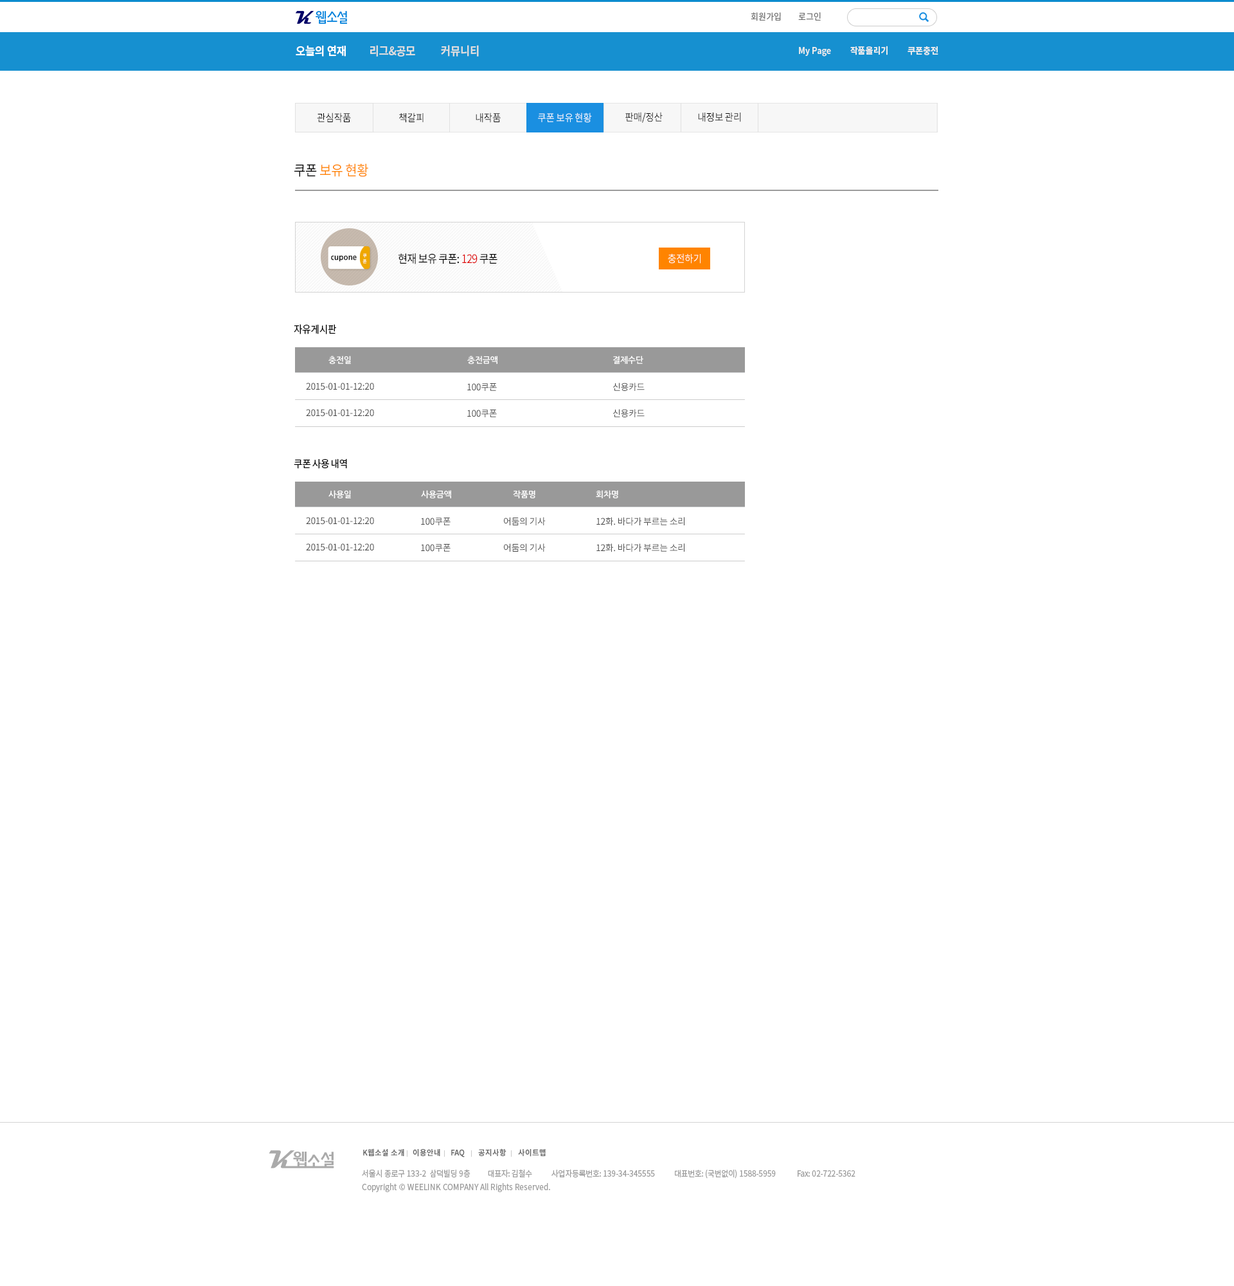
<style>
.page{position:relative;width:1234px;height:1286px;background:#ffffff}
.page>*{position:absolute;margin:0}
.t1{font:9px "NotoSansCJKkr-Regular";letter-spacing:-0.002em;color:#727272;scale:0.92 1}
.t2{font:11.6px "NotoSansCJKkr-Bold";letter-spacing:-0.002em;color:#dddddd;scale:0.92 1}
.t3{font:11.6px "NotoSansCJKkr-Bold";letter-spacing:-0.002em;color:#ffffff;scale:0.92 1}
.t4{font:9px "NotoSansCJKkr-Bold";letter-spacing:-0.002em;color:#ececec;scale:0.92 1}
.t5{font:10.3px "NotoSansCJKkr-Regular";letter-spacing:-0.05em;color:#000000;scale:0.92 1}
.t6{font:10.3px "NotoSansCJKkr-Regular";letter-spacing:-0.05em;color:#ffffff;scale:0.92 1}
.t7{font:14.1px "NotoSansCJKkr-Regular";letter-spacing:-0.05em;color:#ff8400;scale:0.92 1}
.t8{font:14.1px "NotoSansCJKkr-Regular";letter-spacing:-0.05em;color:#000000;scale:0.92 1}
.t9{font:7.7px "RixJGoB";letter-spacing:0.02em;color:#010101;scale:0.95 1}
.t10{font:4.5px "NotoSansCJKkr-Bold";color:#ffffff;scale:0.95 1}
.t11{font:11.6px "NotoSansCJKkr-Regular";letter-spacing:-0.05em;color:#000000;scale:0.92 1}
.t12{font:11.6px "NotoSansCJKkr-Regular";letter-spacing:-0.05em;color:#de0303;scale:0.92 1}
.t13{font:8.4px "NanumGothicOTFBold";letter-spacing:-0.025em;color:#ffffff}
.t14{font:9px/26.4px "NotoSansCJKkr-Regular";letter-spacing:-0.025em;color:#474747}
.t15{font:7.7px "NotoSansCJKkr-Bold";color:#666666;scale:0.96 1}
.t16{font:8.4px "NotoSansCJKkr-Regular";letter-spacing:-0.025em;color:#9d9d9d;scale:0.92 1}
.t17{font:8.4px "NotoSansCJKkr-Regular";color:#9d9d9d;scale:0.92 1}
</style>
<div class="page">
<p class="t1" style="left:751px;top:12px;width:30px;height:9px">회원가입</p>
<p class="t1" style="left:798px;top:12px;width:23px;height:9px">로그인</p>
<p class="t2" style="left:296px;top:45px;width:183px;height:12px"><span class="t3">오늘의 연재         </span>리그&amp;공모          커뮤니티</p>
<p class="t4" style="left:799px;top:46px;width:140px;height:11px">My Page          작품올리기          쿠폰충전</p>
<p class="t5" style="left:317px;top:113px;width:34px;height:10px">관심작품</p>
<p class="t5" style="left:399px;top:113px;width:25px;height:10px">책갈피</p>
<p class="t5" style="left:476px;top:113px;width:25px;height:10px">내작품</p>
<p class="t6" style="left:538px;top:113px;width:54px;height:10px">쿠폰 보유 현황</p>
<p class="t5" style="left:626px;top:112px;width:37px;height:11px">판매/정산</p>
<p class="t5" style="left:698px;top:113px;width:43px;height:9px">내정보 관리</p>
<p class="t7" style="left:294px;top:163px;width:74px;height:14px"><span class="t8">쿠폰 </span>보유 현황</p>
<p class="t9" style="left:331px;top:255px;width:26px;height:7px">cupone</p>
<p class="t10" style="left:363px;top:253px;width:4px;height:11px">쿠<br>폰</p>
<p class="t11" style="left:399px;top:253px;width:99px;height:11px">현재 보유 쿠폰: <span class="t12">129 </span>쿠폰</p>
<p class="t6" style="left:668px;top:253px;width:33px;height:11px">충전하기</p>
<p class="t5" style="left:294px;top:324px;width:42px;height:10px">자유게시판</p>
<p class="t13" style="left:328px;top:356px;width:23px;height:8px">충전일</p>
<p class="t13" style="left:467px;top:356px;width:31px;height:8px">충전금액</p>
<p class="t13" style="left:613px;top:356px;width:31px;height:8px">결제수단</p>
<p class="t14" style="left:306px;top:382px;width:68px;height:35px">2015-01-01-12:20<br>2015-01-01-12:20</p>
<p class="t14" style="left:467px;top:383px;width:30px;height:34px">100쿠폰<br>100쿠폰</p>
<p class="t14" style="left:613px;top:382px;width:32px;height:35px">신용카드<br>신용카드</p>
<p class="t5" style="left:294px;top:458px;width:53px;height:11px">쿠폰 사용 내역</p>
<p class="t13" style="left:328px;top:490px;width:23px;height:8px">사용일</p>
<p class="t13" style="left:421px;top:490px;width:30px;height:8px">사용금액</p>
<p class="t13" style="left:513px;top:490px;width:23px;height:8px">작품명</p>
<p class="t13" style="left:596px;top:490px;width:22px;height:8px">회차명</p>
<p class="t14" style="left:306px;top:517px;width:68px;height:34px">2015-01-01-12:20<br>2015-01-01-12:20</p>
<p class="t14" style="left:421px;top:518px;width:30px;height:34px">100쿠폰<br>100쿠폰</p>
<p class="t14" style="left:504px;top:517px;width:42px;height:35px">어둠의 기사<br>어둠의 기사</p>
<p class="t14" style="left:597px;top:517px;width:88px;height:35px">12화. 바다가 부르는 소리<br>12화. 바다가 부르는 소리</p>
<p class="t15" style="left:363px;top:1148px;width:41px;height:8px">K웹소설 소개</p>
<p class="t15" style="left:413px;top:1149px;width:27px;height:7px">이용안내</p>
<p class="t15" style="left:451px;top:1149px;width:14px;height:8px">FAQ</p>
<p class="t15" style="left:478px;top:1148px;width:29px;height:8px">공지사항</p>
<p class="t15" style="left:518px;top:1149px;width:28px;height:7px">사이트맵</p>
<p class="t16" style="left:362px;top:1169px;width:494px;height:9px">서울시 종로구 133-2  삼덕빌딩 9층          대표자: 김철수           사업자등록번호: 139-34-345555           대표번호: (국번없이) 1588-5959            Fax: 02-722-5362</p>
<p class="t17" style="left:362px;top:1182px;width:188px;height:10px"><span class="t16"><br><br></span>Copyright © WEELINK COMPANY All Rights Reserved.</p>
</div>
